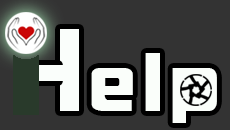
<style>
.page{position:relative;width:230px;height:130px;background:#333333}
.page>*{position:absolute;margin:0}
.t1{font:69.7px "BlackthornsDemo-Black";letter-spacing:0.05em;color:#fafefa;scale:1.04 1}
</style>
<div class="page">
<p class="t1" style="left:91px;top:53px;width:126px;height:70px">elp</p>
</div>
